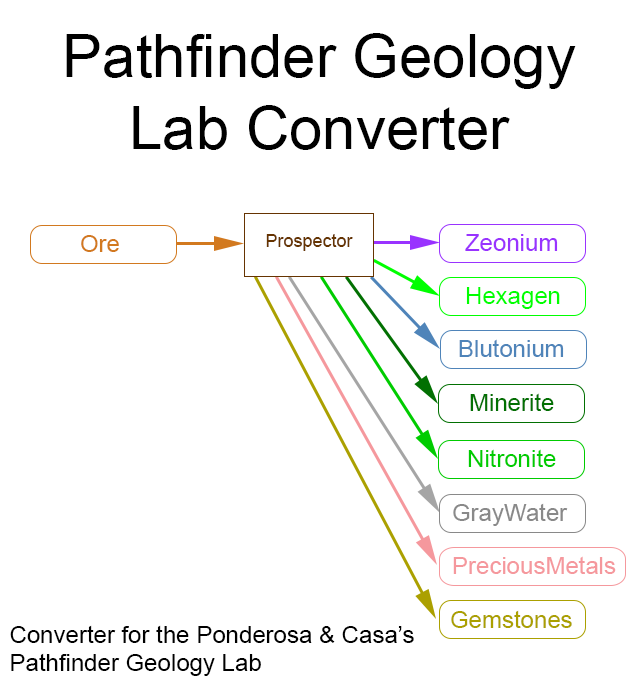
<style>
.page{position:relative;width:642px;height:687px;background:#ffffff}
.page>*{position:absolute;margin:0}
.t1{font:60px "ArialMT";color:#000000}
.t2{font:24px "ArialMT";color:#d2791f}
.t3{font:18px "ArialMT";color:#663401}
.t4{font:24px "ArialMT";color:#9933ff}
.t5{font:24px "ArialMT";color:#00ff00}
.t6{font:24px "ArialMT";color:#4f84b9}
.t7{font:24px "ArialMT";color:#027002}
.t8{font:24px "ArialMT";color:#00cc00}
.t9{font:24px "ArialMT";color:#898989}
.t10{font:24px "ArialMT";color:#f5989d}
.t11{font:24px "ArialMT";color:#aba000}
.t12{font:24px "ArialMT";color:#000000}
</style>
<div class="page">
<p class="t1" style="left:66px;top:33px;width:510px;height:117px;text-align:center">Pathfinder Geology<br>Lab Converter</p>
<p class="t2" style="left:81px;top:235px;width:38px;height:17px">Ore</p>
<p class="t3" style="left:266px;top:234px;width:87px;height:17px">Prospector</p>
<p class="t4" style="left:465px;top:234px;width:93px;height:17px">Zeonium</p>
<p class="t5" style="left:466px;top:287px;width:94px;height:22px">Hexagen</p>
<p class="t6" style="left:459px;top:339px;width:105px;height:18px">Blutonium</p>
<p class="t7" style="left:470px;top:393px;width:84px;height:18px">Minerite</p>
<p class="t8" style="left:468px;top:449px;width:88px;height:18px">Nitronite</p>
<p class="t9" style="left:453px;top:503px;width:115px;height:23px">GrayWater</p>
<p class="t10" style="left:453px;top:556px;width:163px;height:18px">PreciousMetals</p>
<p class="t11" style="left:451px;top:610px;width:121px;height:18px">Gemstones</p>
<p class="t12" style="left:10px;top:625px;width:404px;height:51px">Converter for the Ponderosa &amp; Casa’s<br>Pathfinder Geology Lab</p>
</div>
